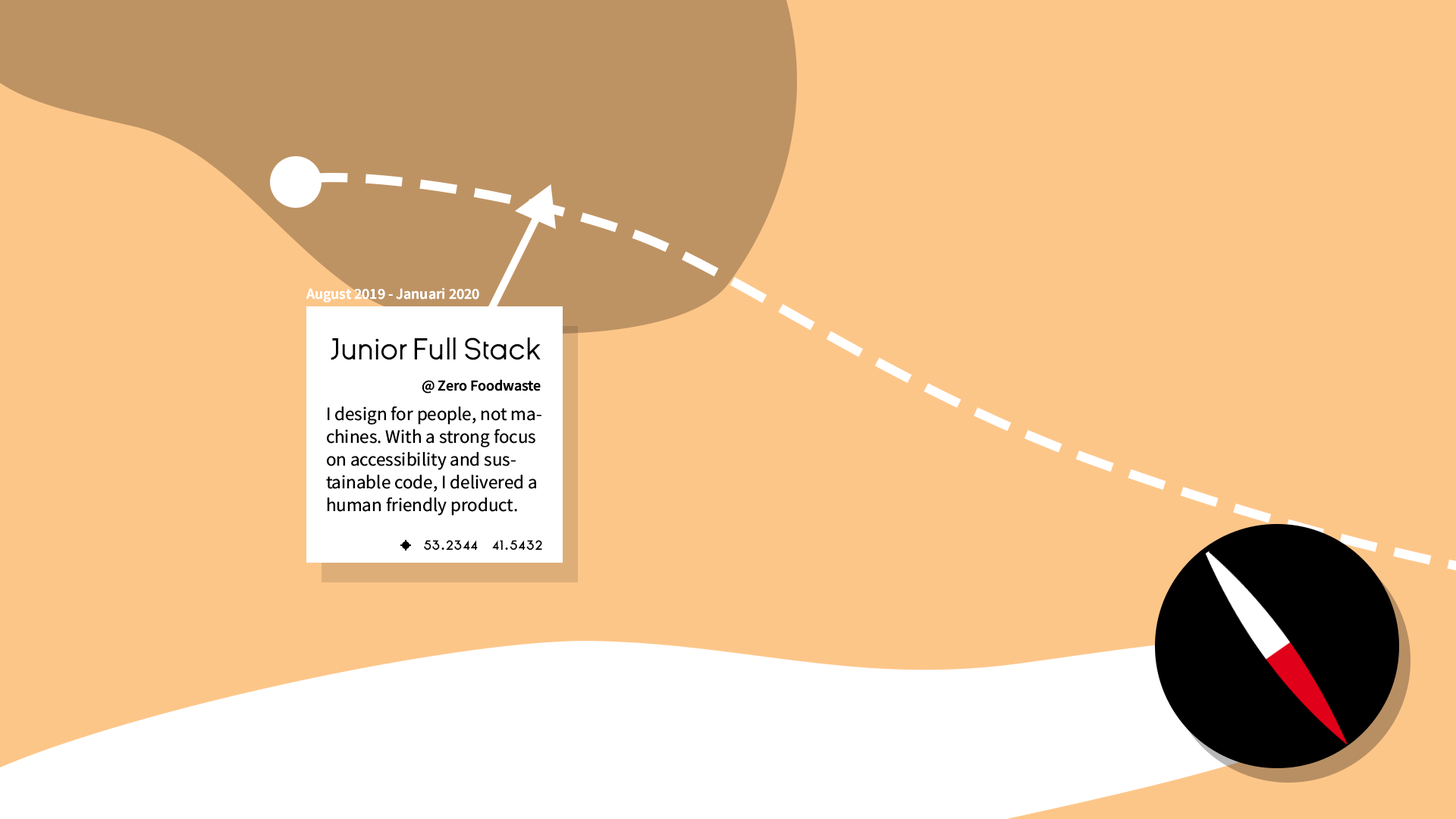
<style>
.page{position:relative;width:1456px;height:819px;background:#fdc689}
.page>*{position:absolute;margin:0}
.t1{font:15.2px "SourceSansRoman-Semibold";color:#ffffff}
.t2{font:30.3px "GinoraSans-Regular";color:#000000}
.t3{font:15.2px "SourceSansRoman-Semibold";color:#000000}
.t4{font:19px "SourceSansRoman-Regular";color:#000000}
.t5{font:19px "GinoraSans-Regular";color:#000000}
</style>
<div class="page">
<p class="t1" style="left:306px;top:287px;width:173px;height:16px">August 2019 - Januari 2020</p>
<p class="t2" style="left:331px;top:337px;width:210px;height:23px">Junior Full Stack</p>
<p class="t3" style="left:422px;top:379px;width:119px;height:15px">@ Zero Foodwaste</p>
<p class="t4" style="left:326px;top:406px;width:215px;height:110px">I design for people, not machines. With a strong focus on accessibility and sustainable code, I delivered a human friendly product.</p>
<p class="t5" style="left:424px;top:540px;width:118px;height:11px">53.2344    41.5432</p>
</div>
